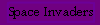
<style>
.page{position:relative;width:100px;height:25px;background:#700081}
.page>*{position:absolute;margin:0}
.t1{font:13.9px "FootlightMTLight";color:#000000}
</style>
<div class="page">
<p class="t1" style="left:9px;top:6px;width:84px;height:13px">Space Invaders</p>
</div>
